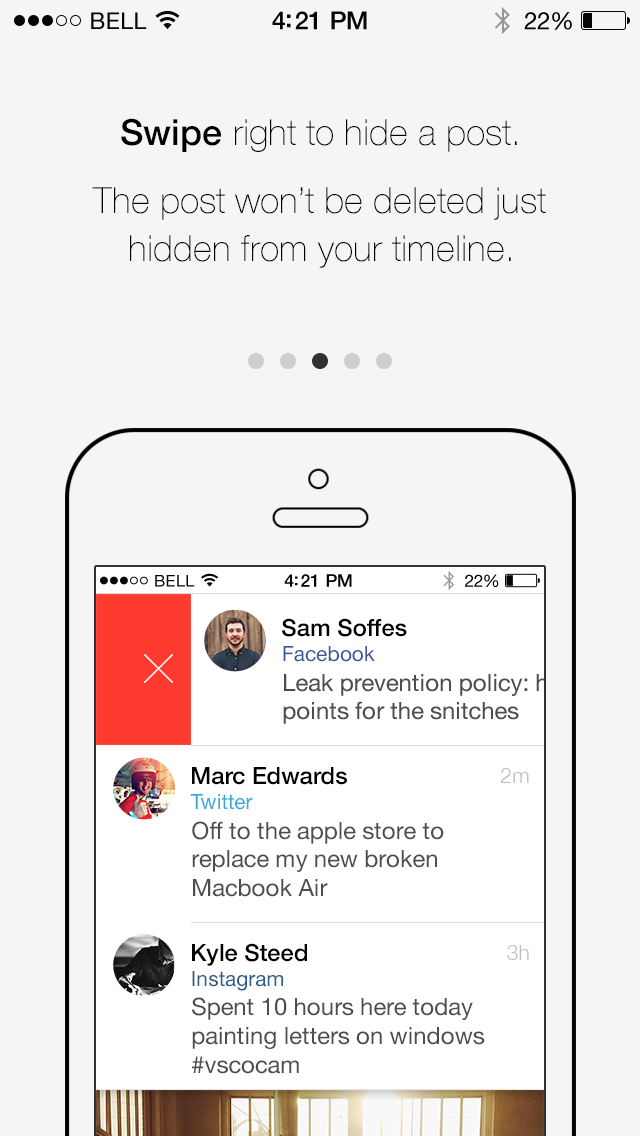
<style>
.page{position:relative;width:640px;height:1136px;background:#f5f5f5}
.page>*{position:absolute;margin:0}
.t1{font:23px "HelveticaNeue";letter-spacing:0.02em;color:#060606}
.t2{font:25px "HelveticaNeue-Medium";letter-spacing:-0.02em;color:#060606}
.t3{font:24px "HelveticaNeue";letter-spacing:-0.02em;color:#060606}
.t4{font:36px "HelveticaNeue-Medium";color:#000000}
.t5{font:36px "HelveticaNeue-Thin";color:#000000}
.t6{font:16.2px "HelveticaNeue";letter-spacing:0.02em;color:#060606}
.t7{font:17.6px "HelveticaNeue-Medium";letter-spacing:-0.02em;color:#060606}
.t8{font:16.9px "HelveticaNeue";letter-spacing:-0.02em;color:#060606}
.t9{font:23.8px "HelveticaNeue-Medium";color:#000000}
.t10{font:21px "HelveticaNeue";color:#3b5998}
.t11{font:21px "HelveticaNeue-Light";color:#bebebe}
.t12{font:21px "HelveticaNeue";color:#34aadc}
.t13{font:23.8px "HelveticaNeue";color:#4d4d4d}
.t14{font:21px "HelveticaNeue";color:#2e5e86}
</style>
<div class="page">
<p class="t1" style="left:91px;top:12px;width:56px;height:17px">BELL</p>
<p class="t2" style="left:272px;top:11px;width:95px;height:19px">4:21 PM</p>
<p class="t3" style="left:524px;top:12px;width:48px;height:18px">22%</p>
<p class="t4" style="left:121px;top:118px;width:100px;height:34px">Swipe</p>
<p class="t5" style="left:235px;top:119px;width:282px;height:33px">right to hide a post.</p>
<p class="t5" style="left:92px;top:187px;width:454px;height:33px">The post won’t be deleted just</p>
<p class="t5" style="left:130px;top:235px;width:381px;height:33px">hidden from your timeline.</p>
<p class="t6" style="left:155px;top:575px;width:40px;height:12px">BELL</p>
<p class="t7" style="left:284px;top:574px;width:68px;height:13px">4:21 PM</p>
<p class="t8" style="left:465px;top:574px;width:34px;height:13px">22%</p>
<p class="t9" style="left:282px;top:618px;width:125px;height:19px">Sam Soffes</p>
<p class="t10" style="left:283px;top:646px;width:92px;height:16px">Facebook</p>
<p class="t9" style="left:192px;top:767px;width:155px;height:18px">Marc Edwards</p>
<p class="t11" style="left:500px;top:768px;width:29px;height:15px">2m</p>
<p class="t12" style="left:190px;top:794px;width:63px;height:16px">Twitter</p>
<p class="t13" style="left:192px;top:821px;width:252px;height:76px">Off to the apple store to<br>replace my new broken<br>Macbook Air</p>
<p class="t9" style="left:192px;top:943px;width:115px;height:23px">Kyle Steed</p>
<p class="t11" style="left:507px;top:945px;width:22px;height:15px">3h</p>
<p class="t14" style="left:192px;top:971px;width:91px;height:20px">Instagram</p>
<p class="t13" style="left:192px;top:997px;width:293px;height:77px">Spent 10 hours here today <br>painting letters on windows<br>#vscocam</p>
</div>
